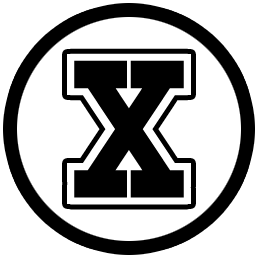
<style>
.page{position:relative;width:258px;height:258px;background:#ffffff}
.page>*{position:absolute;margin:0}
.t1{font:200px "CollegeBold";color:#000000}
</style>
<div class="page">
<p class="t1" style="left:74px;top:60px;width:110px;height:138px">X</p>
</div>
